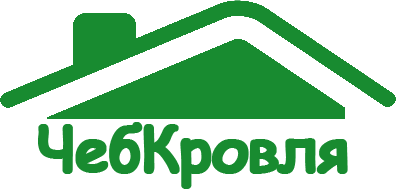
<style>
.page{position:relative;width:396px;height:189px;background:#ffffff}
.page>*{position:absolute;margin:0}
.t1{font:62px "ComicSansMS-Bold";letter-spacing:-0.038em;color:#188b30;font-weight:bold}
</style>
<div class="page">
<p class="t1" style="left:38px;top:122px;width:310px;height:67px">ЧебКровля</p>
</div>
